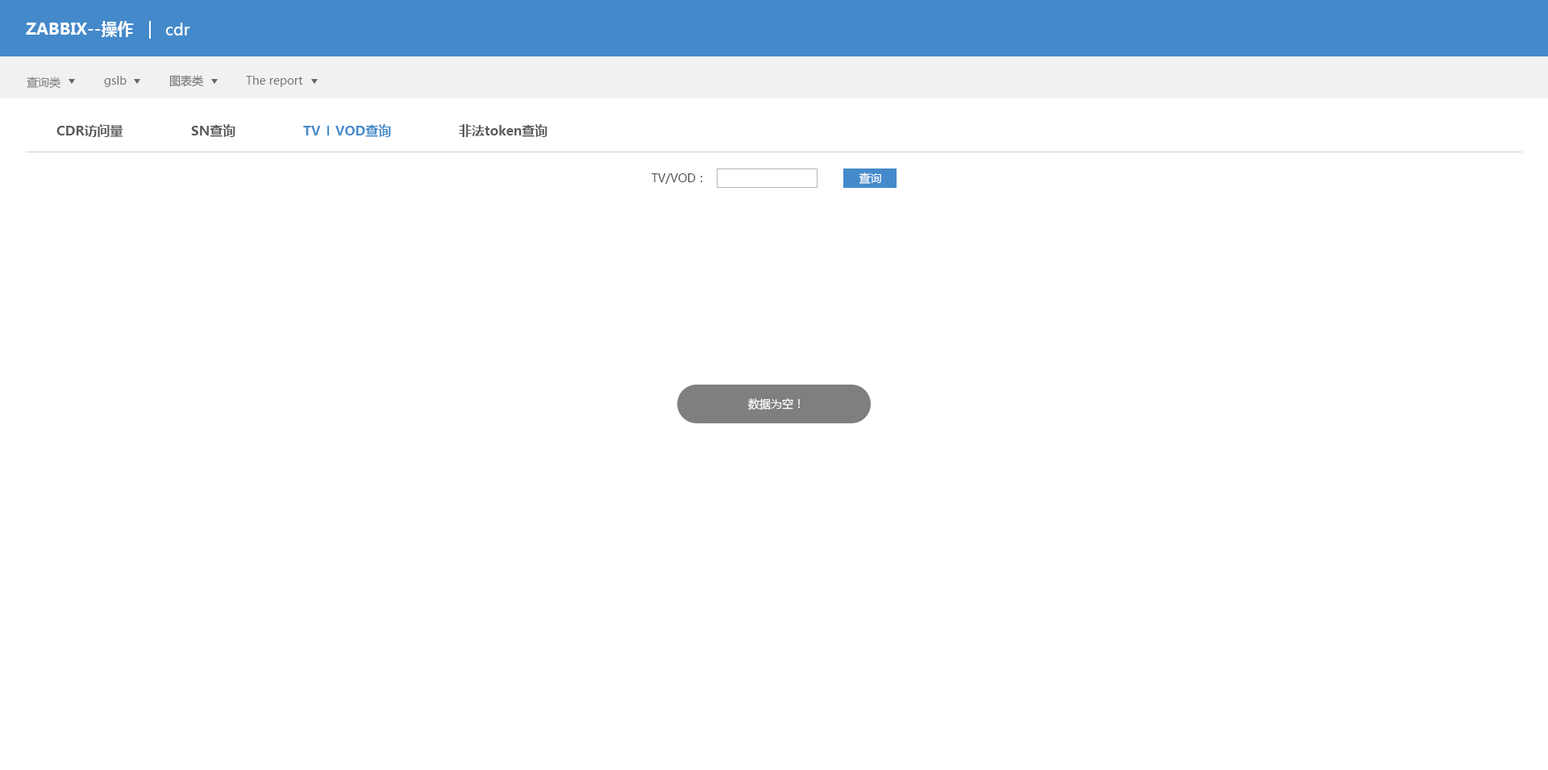
<style>
.page{position:relative;width:1548px;height:770px;background:#ffffff}
.page>*{position:absolute;margin:0}
.t1{font:16.1px "MicrosoftYaHei-Bold";color:#ffffff}
.t2{font:16.1px "MicrosoftYaHei";color:#ffffff}
.t3{font:11.3px "MicrosoftYaHei";color:#828282}
.t4{font:11.3px "MicrosoftYaHei";color:#747474}
.t5{font:12.9px "MicrosoftYaHei-Bold";color:#5b5b5b}
.t6{font:12.9px "MicrosoftYaHei-Bold";color:#448aca}
.t7{font:11.3px "MicrosoftYaHei";color:#4a4a4a}
.t8{font:11.3px "MicrosoftYaHei";color:#ffffff}
</style>
<div class="page">
<p class="t1" style="left:26px;top:21px;width:108px;height:16px">ZABBIX--操作</p>
<p class="t2" style="left:165px;top:23px;width:25px;height:12px">cdr</p>
<p class="t3" style="left:27px;top:77px;width:33px;height:12px">查询类</p>
<p class="t4" style="left:104px;top:76px;width:23px;height:11px">gslb</p>
<p class="t4" style="left:169px;top:75px;width:34px;height:12px">图表类</p>
<p class="t4" style="left:246px;top:76px;width:57px;height:11px">The report</p>
<p class="t5" style="left:56px;top:124px;width:67px;height:13px">CDR访问量</p>
<p class="t5" style="left:191px;top:124px;width:44px;height:13px">SN查询</p>
<p class="t6" style="left:303px;top:126px;width:18px;height:9px">TV</p>
<p class="t6" style="left:335px;top:124px;width:56px;height:13px">VOD查询</p>
<p class="t5" style="left:459px;top:124px;width:89px;height:13px">非法token查询</p>
<p class="t7" style="left:652px;top:173px;width:50px;height:11px">TV/VOD：</p>
<p class="t8" style="left:859px;top:173px;width:22px;height:11px">查询</p>
<p class="t8" style="left:748px;top:398px;width:52px;height:12px">数据为空！</p>
</div>
